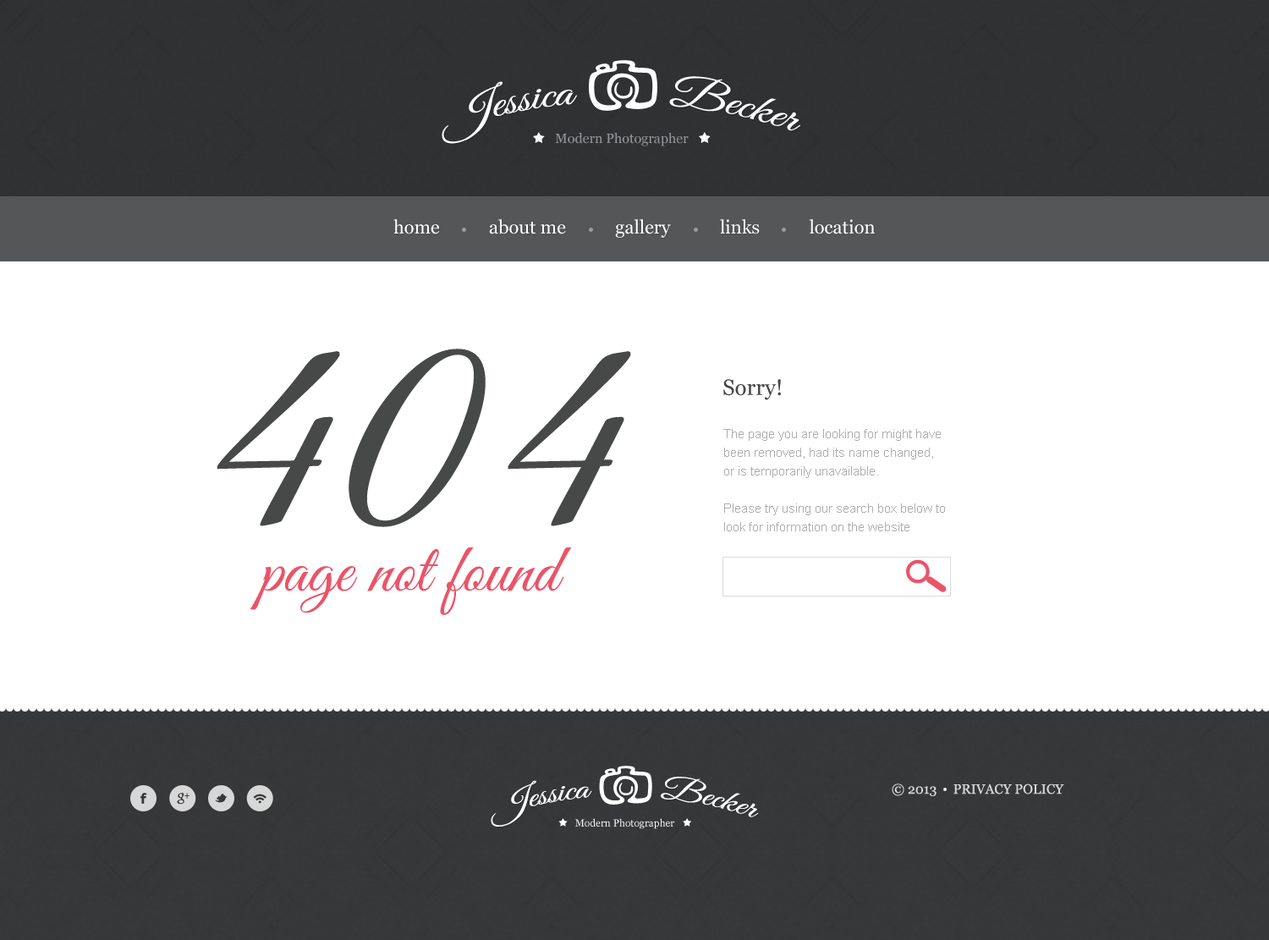
<style>
.page{position:relative;width:1269px;height:940px;background:#ffffff}
.page>*{position:absolute;margin:0}
.t1{font:40.6px "GreatVibes-Regular";color:#ffffff}
.t2{font:13.5px "Georgia";color:#939598}
.t3{font:18.6px "Georgia";color:#ffffff}
.t4{font:301.1px "GreatVibes-Regular";color:#474848}
.t5{font:22px "Georgia";color:#474848}
.t6{font:12.7px/18.6px "ArialMT";color:#adadad}
.t7{font:69.4px "GreatVibes-Regular";color:#eb5368}
.t8{font:30.3px "GreatVibes-Regular";color:#ffffff}
.t9{font:13.5px "Georgia";color:#d7d7d7;text-transform:uppercase}
.t10{font:10.1px "Georgia";color:#ffffff}
</style>
<div class="page">
<p class="t1" style="left:442px;top:76px;width:358px;height:68px">Jessica       Becker</p>
<p class="t2" style="left:555px;top:133px;width:134px;height:13px">Modern Photographer</p>
<p class="t3" style="left:393px;top:219px;width:482px;height:19px">home           about me           gallery           links           location</p>
<p class="t4" style="left:217px;top:349px;width:414px;height:178px">404</p>
<p class="t5" style="left:723px;top:379px;width:58px;height:21px">Sorry!</p>
<p class="t6" style="left:723px;top:429px;width:222px;height:102px">The page you are looking for might have been removed, had its name changed, or is temporarily unavailable.<br><br>Please try using our search box below to look for information on the website</p>
<p class="t7" style="left:250px;top:547px;width:322px;height:68px">page not found</p>
<p class="t8" style="left:491px;top:777px;width:268px;height:49px">Jessica       Becker</p>
<p class="t9" style="left:892px;top:783px;width:172px;height:13px">© 2013     Privacy policy</p>
<p class="t10" style="left:575px;top:818px;width:100px;height:11px">Modern Photographer</p>
</div>
